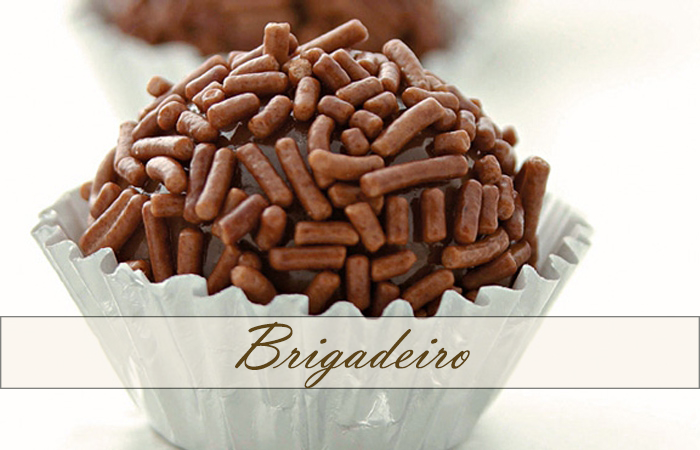
<style>
.page{position:relative;width:700px;height:450px}
.page>*{position:absolute;margin:0}
.t1{font:66.7px "VladimirScript";color:#5c4317}
</style>
<div class="page">
<p class="t1" style="left:235px;top:321px;width:235px;height:68px">Brigadeiro</p>
</div>
